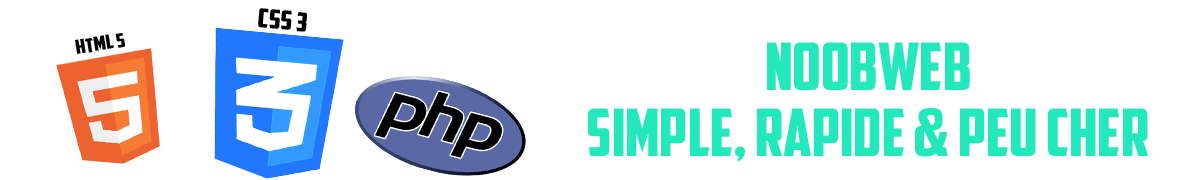
<style>
.page{position:relative;width:1200px;height:180px;background:#ffffff}
.page>*{position:absolute;margin:0}
.t1{font:26.3px "AmericanCaptain";color:#000000;scale:1.18 1}
.t2{font:19.5px "AmericanCaptain";color:#000000;scale:1.18 1}
.t3{font:65.6px "AmericanCaptain";color:#22e8bc}
</style>
<div class="page">
<p class="t1" style="left:258px;top:8px;width:49px;height:24px;rotate:5deg">css 3</p>
<p class="t2" style="left:75px;top:33px;width:50px;height:21px;rotate:-9deg">html 5</p>
<p class="t3" style="left:767px;top:42px;width:203px;height:48px">noobweb</p>
<p class="t3" style="left:588px;top:108px;width:561px;height:53px">simple, rapide &amp; peu cher</p>
</div>
